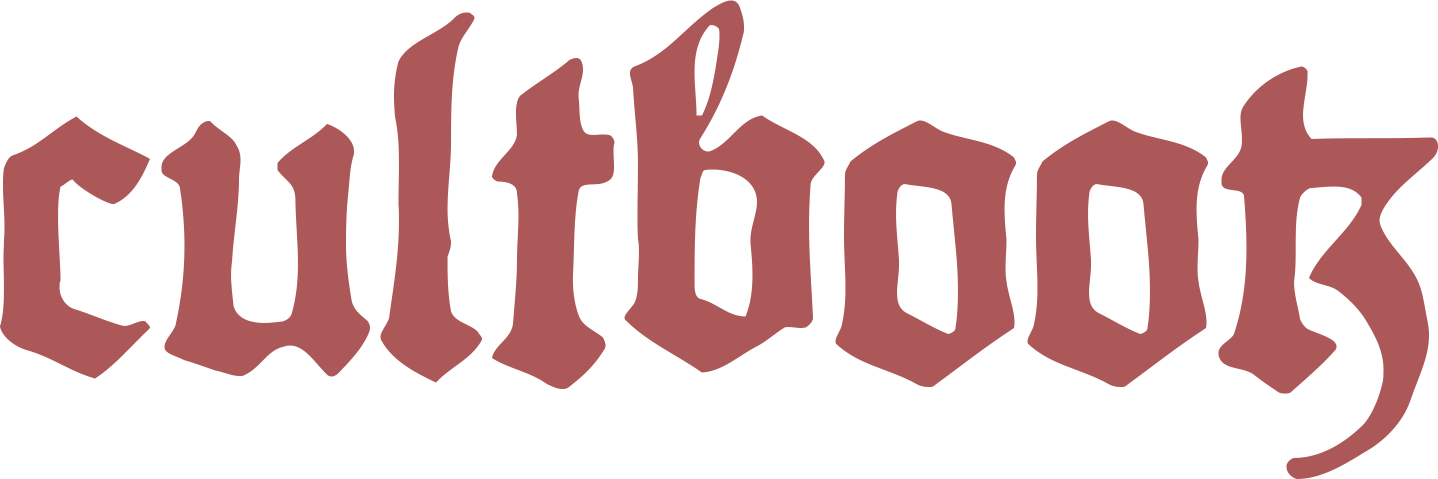
<style>
.page{position:relative;width:1438px;height:479px;background:#ffffff}
.page>*{position:absolute;margin:0}
.t1{font:500px "GothicusRoman";color:#ac5858}
</style>
<div class="page">
<p class="t1" style="left:0px;top:0px;width:1438px;height:479px">cultbook</p>
</div>
